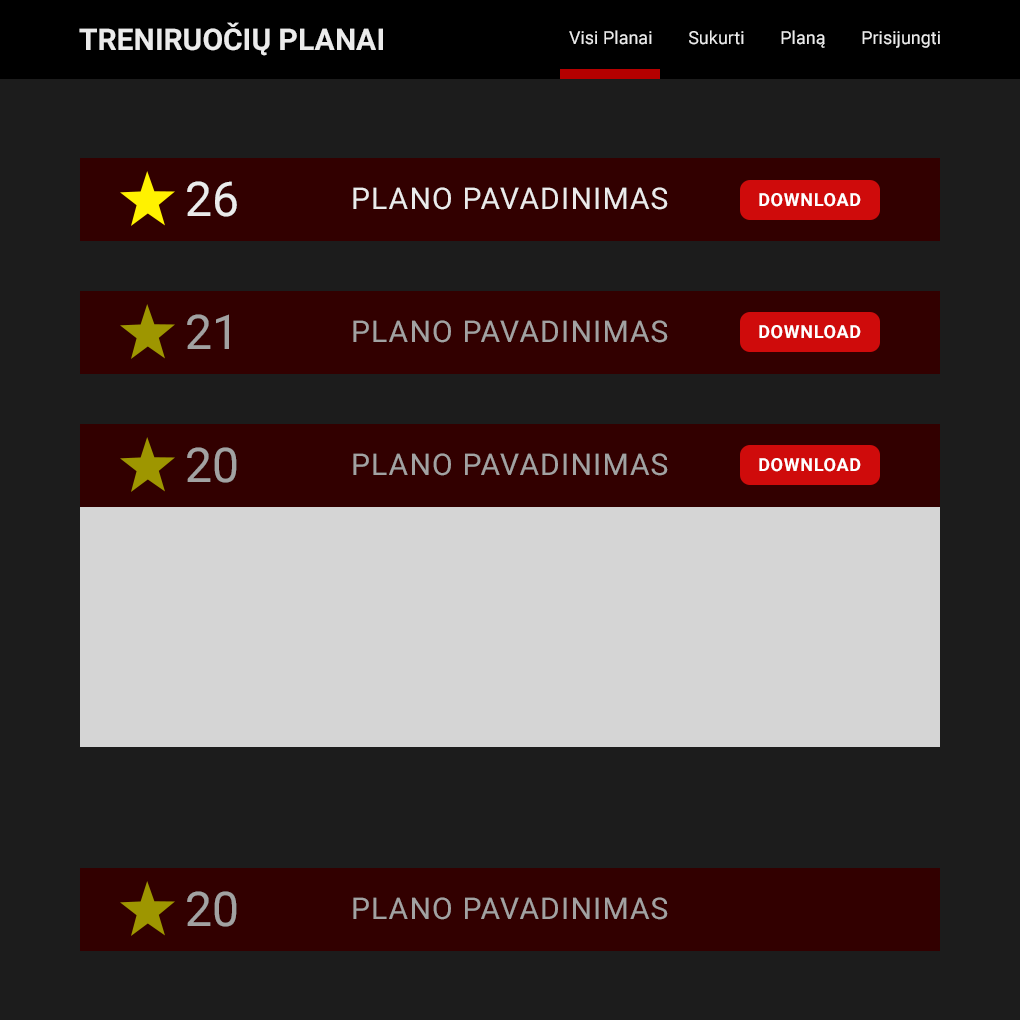
<style>
.page{position:relative;width:1020px;height:1020px;background:#1c1c1c}
.page>*{position:absolute;margin:0}
.t1{font:30px "Roboto-Bold";color:#ebebeb;text-transform:uppercase}
.t2{font:18px "Roboto-Regular";color:#ebebeb}
.t3{font:48px "Roboto-Regular";color:#ebebeb;text-transform:uppercase}
.t4{font:30px "Roboto-Regular";letter-spacing:0.04em;color:#ebebeb;text-transform:uppercase}
.t5{font:18px "Roboto-Bold";letter-spacing:0.04em;color:#ffffff;text-transform:uppercase}
.t6{font:48px "Roboto-Regular";color:#a2a2a2;text-transform:uppercase}
.t7{font:30px "Roboto-Regular";letter-spacing:0.04em;color:#a2a2a2;text-transform:uppercase}
</style>
<div class="page">
<p class="t1" style="left:79px;top:22px;width:304px;height:34px">Treniruočių planai</p>
<p class="t2" style="left:569px;top:30px;width:371px;height:18px">Visi Planai        Sukurti        Planą        Prisijungti</p>
<p class="t3" style="left:187px;top:181px;width:50px;height:36px">26</p>
<p class="t4" style="left:353px;top:187px;width:315px;height:23px">Plano pavadinimas</p>
<p class="t5" style="left:759px;top:193px;width:102px;height:14px">Download</p>
<p class="t6" style="left:187px;top:314px;width:42px;height:35px">21</p>
<p class="t7" style="left:353px;top:320px;width:315px;height:23px">Plano pavadinimas</p>
<p class="t5" style="left:759px;top:325px;width:102px;height:14px">Download</p>
<p class="t6" style="left:187px;top:447px;width:50px;height:36px">20</p>
<p class="t7" style="left:353px;top:453px;width:315px;height:23px">Plano pavadinimas</p>
<p class="t5" style="left:759px;top:458px;width:102px;height:14px">Download</p>
<p class="t6" style="left:187px;top:891px;width:50px;height:36px">20</p>
<p class="t7" style="left:353px;top:897px;width:315px;height:23px">Plano pavadinimas</p>
</div>
